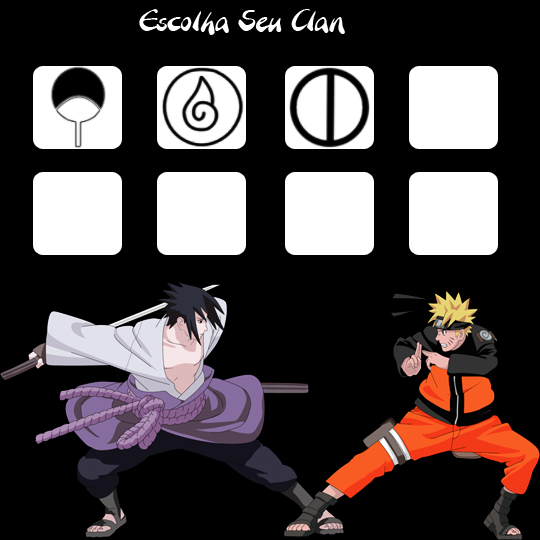
<style>
.page{position:relative;width:540px;height:540px;background:#000000}
.page>*{position:absolute;margin:0}
.t1{font:30px "BranchingMouse-Becker";color:#ffffff}
</style>
<div class="page">
<p class="t1" style="left:139px;top:9px;width:206px;height:26px">Escolha Seu Clan</p>
</div>
